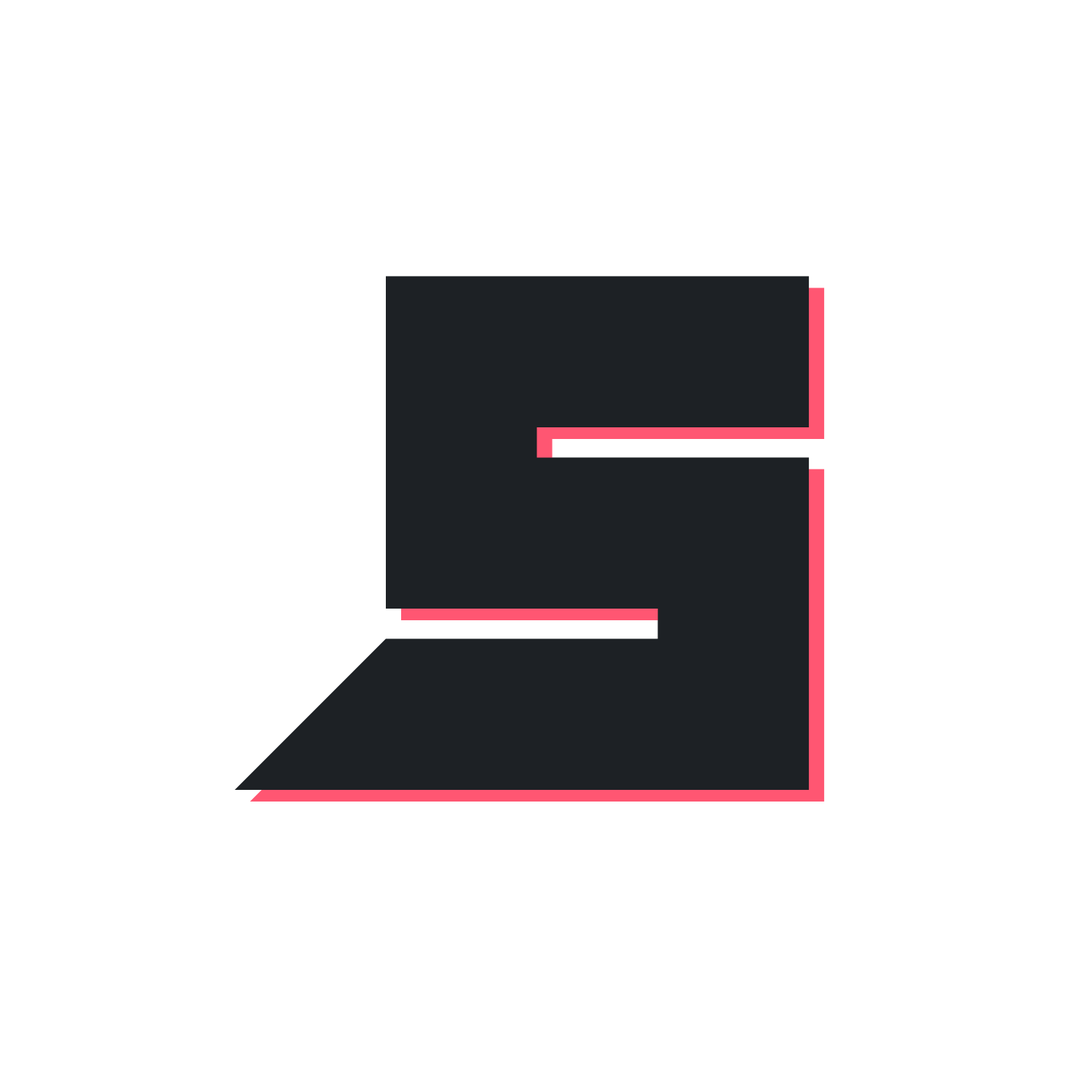
<style>
.page{position:relative;width:1092px;height:1092px;background:#ffffff}
.page>*{position:absolute;margin:0}
.t1{font:618.8px "SheepingCatsStraight";color:#1d2125}
</style>
<div class="page">
<p class="t1" style="left:234px;top:276px;width:576px;height:514px">S</p>
<p class="t1" style="left:250px;top:288px;width:575px;height:514px">S</p>
</div>
